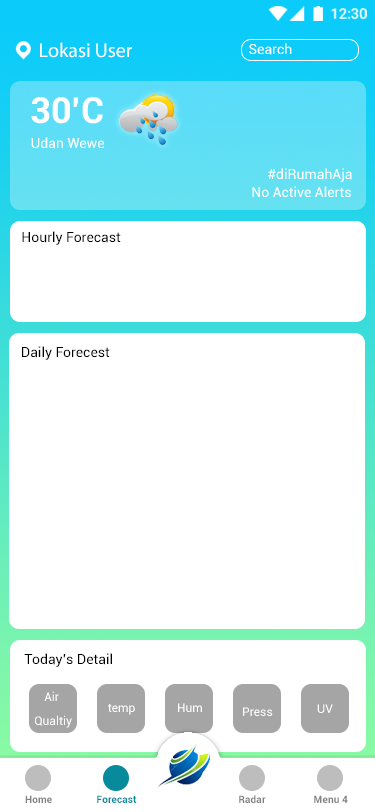
<style>
.page{position:relative;width:375px;height:812px;background:#ffffff}
.page>*{position:absolute;margin:0}
.t1{font:20px "MyriadPro-Regular";color:#ffffff}
.t2{font:14px "Roboto-Regular";color:#ffffff}
.t3{font:36px "Roboto-Bold";color:#ffffff}
.t4{font:14px "Roboto-Regular";color:#000000}
.t5{font:12px/24px "Roboto-Regular";color:#ffffff}
.t6{font:12px "Roboto-Regular";color:#ffffff}
.t7{font:10px "Roboto-Bold";letter-spacing:0.005em;color:#828282}
.t8{font:10px "Roboto-Bold";letter-spacing:0.005em;color:#088a9d}
</style>
<div class="page">
<p class="t1" style="left:40px;top:42px;width:92px;height:16px">Lokasi User</p>
<p class="t2" style="left:249px;top:43px;width:43px;height:12px">Search</p>
<p class="t3" style="left:31px;top:97px;width:72px;height:27px">30’C</p>
<p class="t2" style="left:31px;top:137px;width:73px;height:12px">Udan Wewe</p>
<p class="t2" style="left:268px;top:168px;width:84px;height:14px">#diRumahAja</p>
<p class="t2" style="left:252px;top:186px;width:99px;height:11px">No Active Alerts</p>
<p class="t4" style="left:22px;top:231px;width:99px;height:14px">Hourly Forecast</p>
<p class="t4" style="left:22px;top:346px;width:88px;height:14px">Daily Forecest</p>
<p class="t4" style="left:24px;top:653px;width:88px;height:14px">Today’s Detail</p>
<p class="t5" style="left:35px;top:691px;width:37px;height:37px;text-align:center">Air <br>Qualtiy</p>
<p class="t6" style="left:108px;top:704px;width:27px;height:11px">temp</p>
<p class="t6" style="left:178px;top:703px;width:24px;height:9px">Hum</p>
<p class="t6" style="left:243px;top:707px;width:30px;height:9px">Press</p>
<p class="t6" style="left:317px;top:704px;width:16px;height:9px">UV</p>
<p class="t7" style="left:25px;top:795px;width:27px;height:8px">Home</p>
<p class="t8" style="left:97px;top:795px;width:40px;height:8px">Forecast</p>
<p class="t7" style="left:239px;top:795px;width:27px;height:8px">Radar</p>
<p class="t7" style="left:314px;top:795px;width:34px;height:8px">Menu 4</p>
</div>
